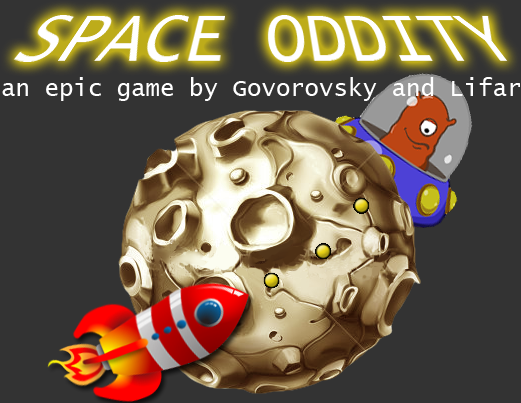
<style>
.page{position:relative;width:521px;height:403px;background:#333333}
.page>*{position:absolute;margin:0}
.t1{font:24px "LucidaConsole";color:#ffffff}
</style>
<div class="page">
<p class="t1" style="left:2px;top:77px;width:518px;height:24px">an epic game by Govorovsky and Lifar</p>
</div>
